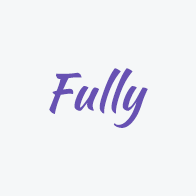
<style>
.page{position:relative;width:196px;height:196px;background:#f5f7f8}
.page>*{position:absolute;margin:0}
.t1{font:50px "KaushanScript-Regular";color:#6751b3}
</style>
<div class="page">
<p class="t1" style="left:49px;top:68px;width:99px;height:60px">Fully</p>
</div>
